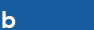
<style>
.page{position:relative;width:94px;height:30px;background:#195fa0}
.page>*{position:absolute;margin:0}
.t1{font:22.5px "CenturyGothic-Bold";color:#ffffff}
</style>
<div class="page">
<p class="t1" style="left:2px;top:11px;width:14px;height:17px">b</p>
</div>
